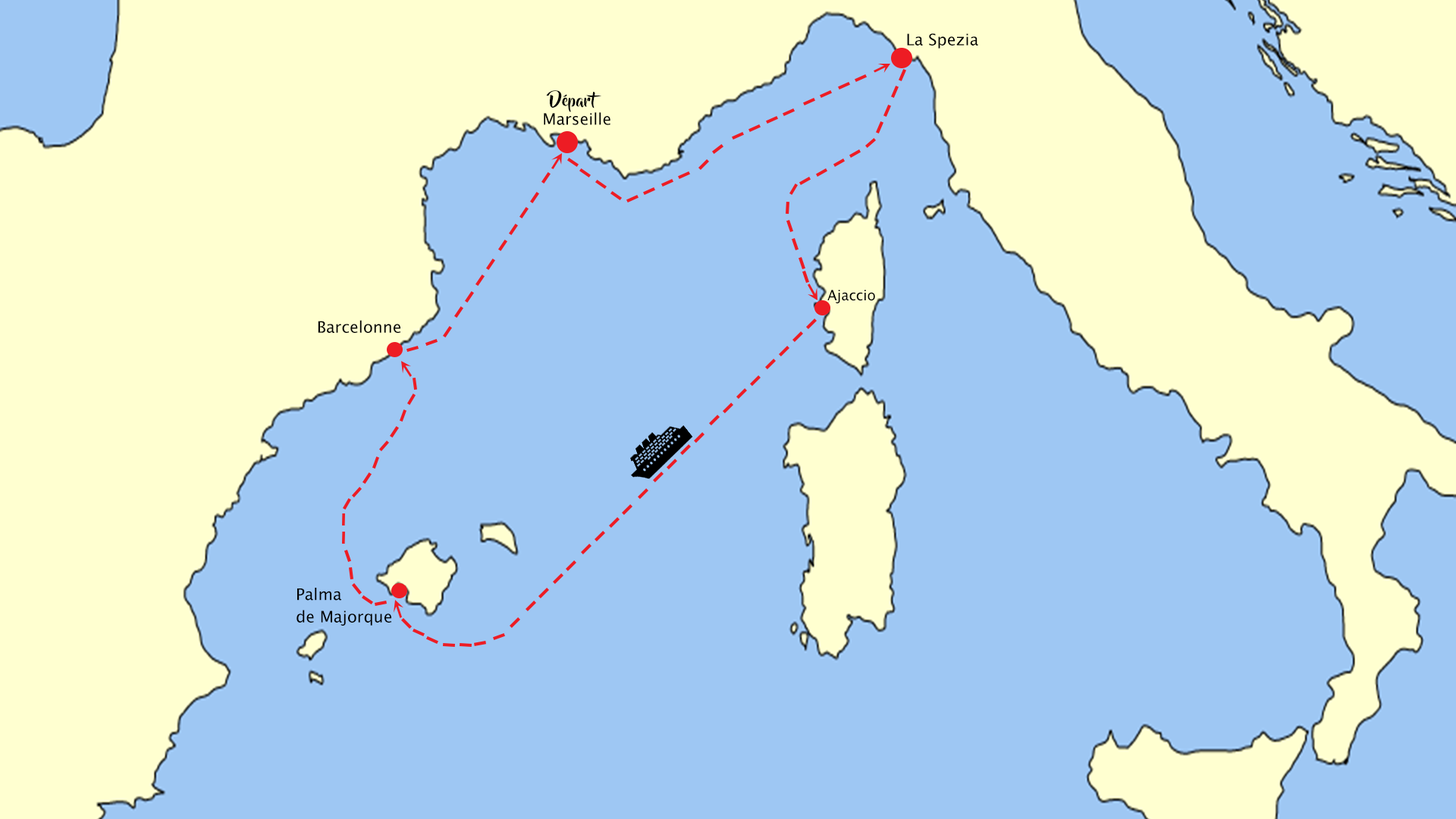
<style>
.page{position:relative;width:1456px;height:819px;background:#9ec7f3}
.page>*{position:absolute;margin:0}
.t1{font:15.9px "LucidaSansUnicode";letter-spacing:0.003em;color:#000000}
.t2{font:15.9px "BeyondTheMountains";letter-spacing:0.003em;color:#000000}
.t3{font:14.5px "LucidaSansUnicode";letter-spacing:0.003em;color:#000000;scale:0.96 1}
</style>
<div class="page">
<p class="t1" style="left:907px;top:33px;width:71px;height:16px">La Spezia</p>
<p class="t2" style="left:546px;top:90px;width:55px;height:22px">Départ</p>
<p class="t1" style="left:544px;top:112px;width:66px;height:13px">Marseille</p>
<p class="t3" style="left:827px;top:290px;width:48px;height:13px">Ajaccio</p>
<p class="t1" style="left:318px;top:320px;width:82px;height:13px">Barcelonne</p>
<p class="t1" style="left:297px;top:588px;width:94px;height:38px">Palma <br>de Majorque</p>
</div>
